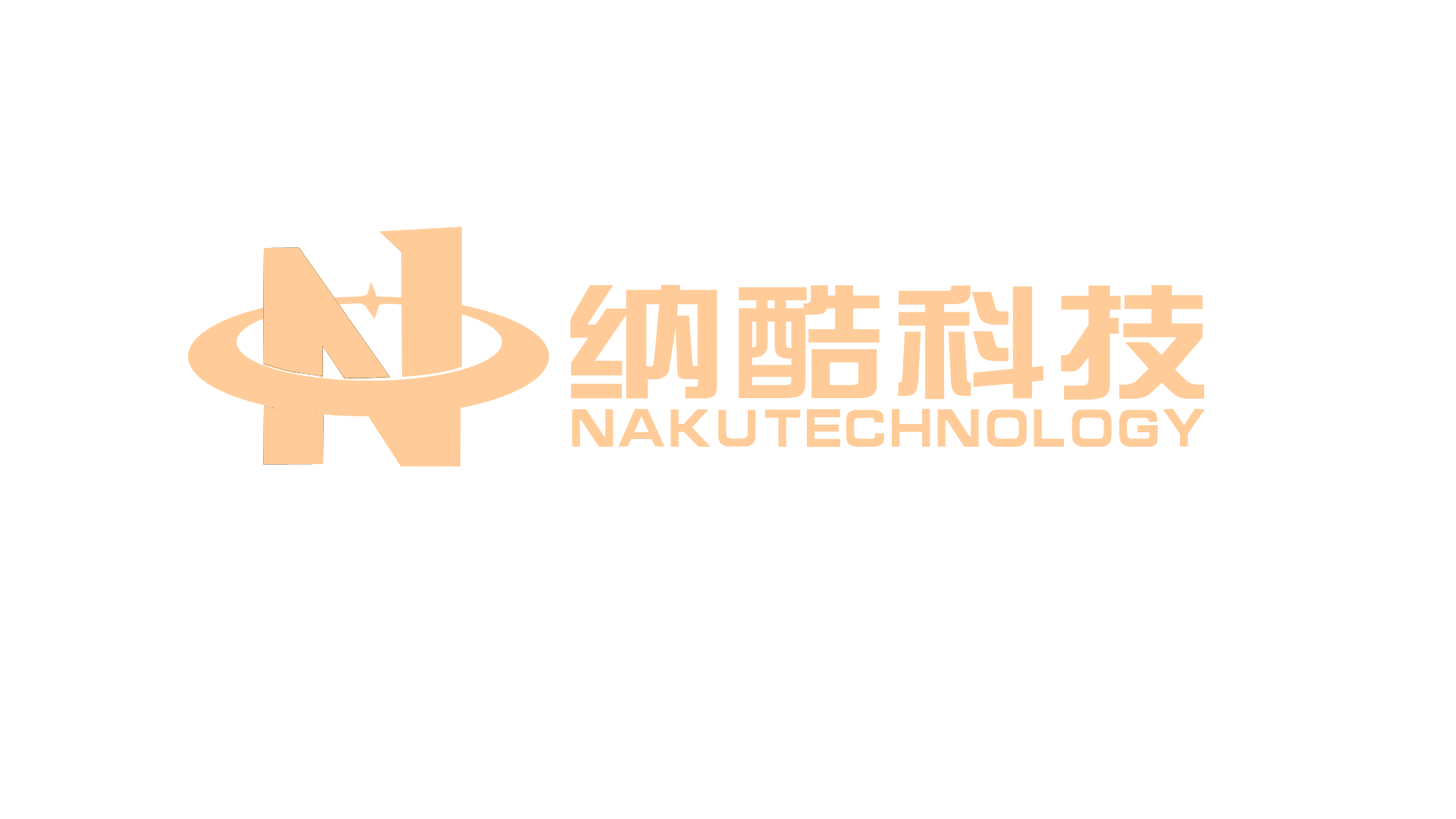
<style>
.page{position:relative;width:1456px;height:819px;background:#ffffff}
.page>*{position:absolute;margin:0}
.t1{font:125.5px "¾­µä×ÛÒÕÌå¼ò-regular";color:#ffcc99;scale:1.3 1}
.t2{font:56px "¾­µä×ÛÒÕÌå¼ò-regular";color:#ffcc99}
</style>
<div class="page">
<p class="t1" style="left:570px;top:284px;width:634px;height:116px">纳酷科技</p>
<p class="t2" style="left:572px;top:409px;width:633px;height:38px">NAKUTECHNOLOGY</p>
</div>
